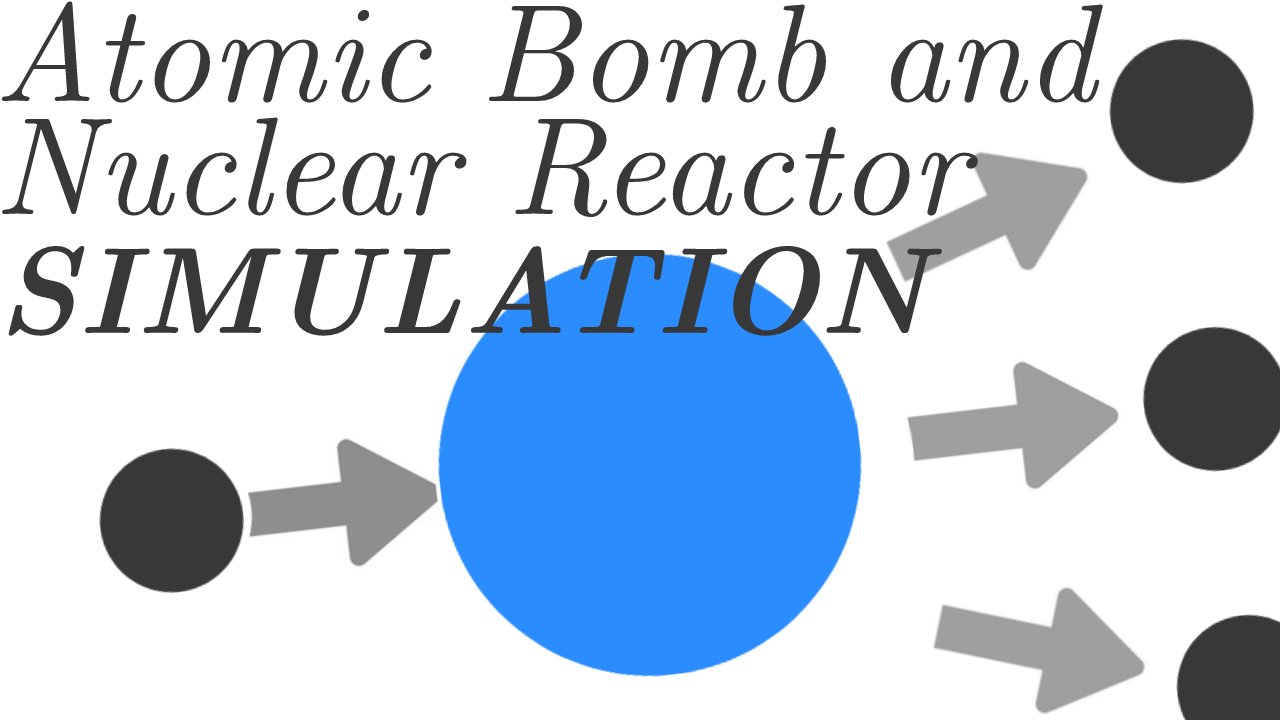
<style>
.page{position:relative;width:1280px;height:720px;background:#ffffff}
.page>*{position:absolute;margin:0}
.t1{font:139px "CMUSerif-Italic";color:#383838}
.t2{font:123px "CMUSerif-BoldItalic";color:#383838}
</style>
<div class="page">
<p class="t1" style="left:1px;top:1px;width:1102px;height:217px">Atomic Bomb and<br>Nuclear Reactor</p>
<p class="t2" style="left:8px;top:245px;width:934px;height:91px">SIMULATION</p>
</div>
